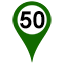
<style>
.page{position:relative;width:64px;height:64px;background:#ffffff}
.page>*{position:absolute;margin:0}
.t1{font:24px "Arial-BoldMT";color:#000000}
</style>
<div class="page">
<p class="t1" style="left:20px;top:11px;width:25px;height:18px">50</p>
</div>
